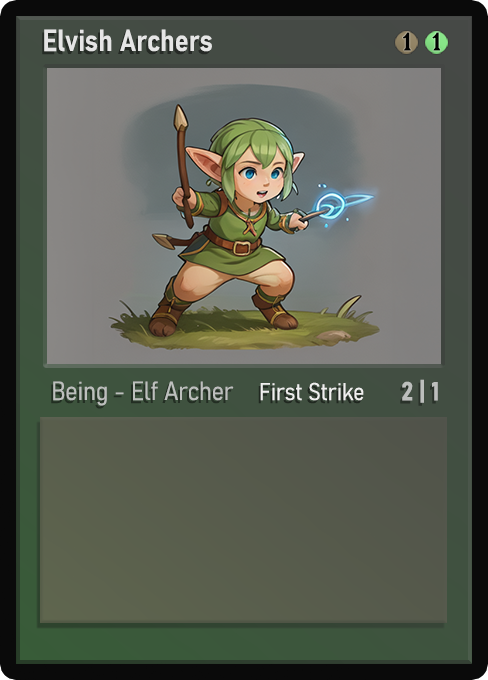
<style>
.page{position:relative;width:488px;height:680px}
.page>*{position:absolute;margin:0}
.t1{font:30px "Bahnschrift-SemiBoldSemiCondensed";color:#f2f2f2;font-weight:bold}
.t2{font:25px "WTRRoycroft";color:#000000;font-weight:bold;scale:1.09 1}
.t3{font:26px "Bahnschrift-LightSemiCondensed";color:#c8c8c8;font-weight:bold}
.t4{font:24px "Bahnschrift-LightSemiCondensed";color:#f0efef;font-weight:bold}
.t5{font:26px "Bahnschrift-BoldSemiCondensed";color:#bdbfbd;font-weight:bold}
</style>
<div class="page">
<p class="t1" style="left:44px;top:29px;width:168px;height:23px;opacity:0.9">Elvish Archers</p>
<p class="t2" style="left:403px;top:32px;width:8px;height:19px">1</p>
<p class="t2" style="left:432px;top:32px;width:9px;height:19px">1</p>
<p class="t3" style="left:53px;top:381px;width:181px;height:25px;opacity:0.9">Being - Elf Archer</p>
<p class="t4" style="left:260px;top:382px;width:104px;height:19px">First Strike</p>
<p class="t5" style="left:402px;top:379px;width:36px;height:24px">2 | 1</p>
</div>
